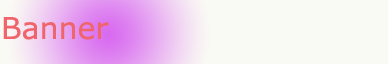
<style>
.page{position:relative;width:388px;height:64px;background:#fafaf4}
.page>*{position:absolute;margin:0}
.t1{font:30px "Verdana";color:#f0656b}
</style>
<div class="page">
<p class="t1" style="left:3px;top:17px;width:106px;height:23px">Banner</p>
</div>
